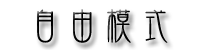
<style>
.page{position:relative;width:200px;height:50px;background:#ffffff}
.page>*{position:absolute;margin:0}
.t1{font:36px "DFJinWen-W3-WIN-BF";color:#000000;font-weight:bold}
</style>
<div class="page">
<p class="t1" style="left:37px;top:9px;width:131px;height:34px">自由模式</p>
</div>
